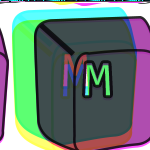
<style>
.page{position:relative;width:150px;height:150px;background:#3f4d4e}
.page>*{position:absolute;margin:0}
.t1{font:50px "Consolas"}
</style>
<div class="page">
<p class="t1" style="left:63px;top:53px;width:25px;height:33px">M</p>
</div>
